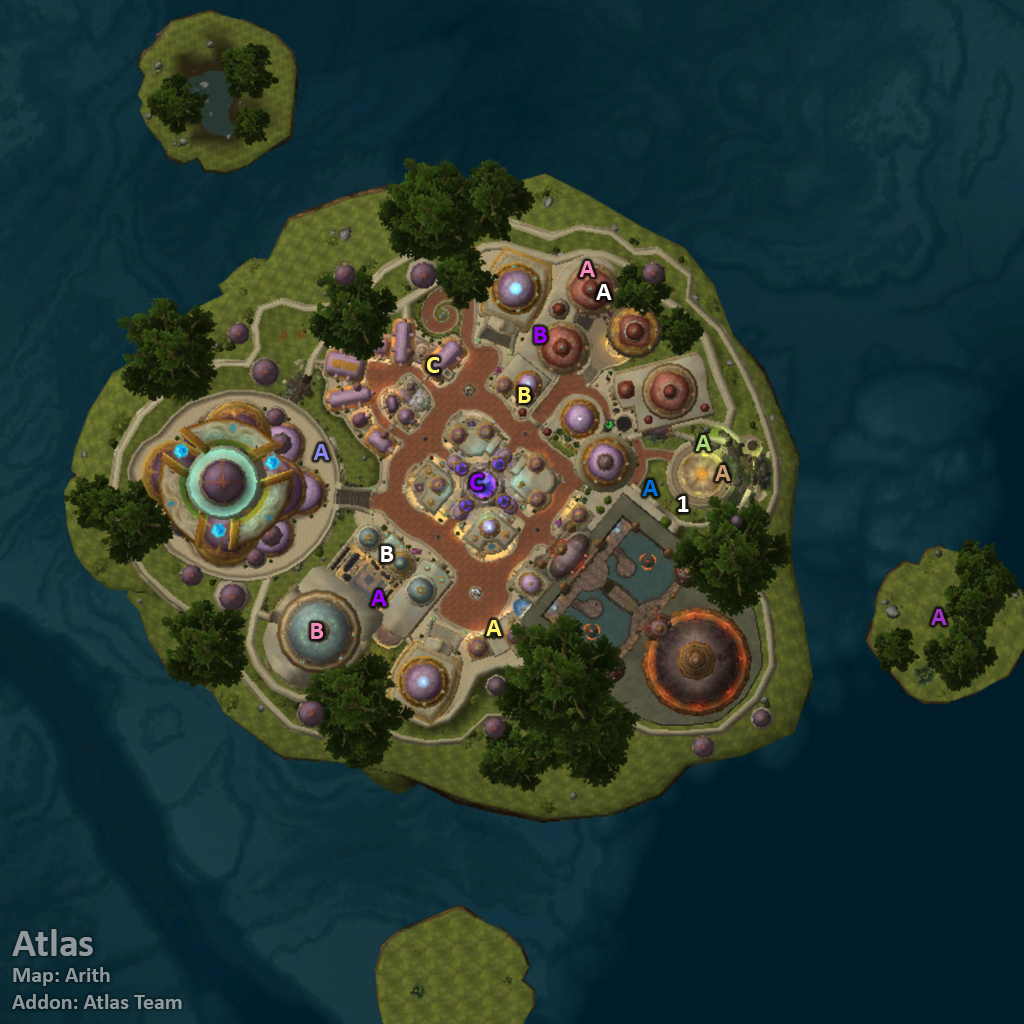
<style>
.page{position:relative;width:1024px;height:1024px}
.page>*{position:absolute;margin:0}
.t1{font:26px "Calibri-Bold";color:#f58cba}
.t2{font:26px "Calibri-Bold";color:#ffffff}
.t3{font:26px "Calibri-Bold";color:#9900ff}
.t4{font:26px "Calibri-Bold";color:#fff569}
.t5{font:26px "Calibri-Bold";color:#abd473}
.t6{font:26px "Calibri-Bold";color:#8788ee}
.t7{font:26px "Calibri-Bold";color:#c79c6e}
.t8{font:26px "Calibri-Bold";color:#0070de}
.t9{font:26px "Calibri-Bold";color:#a330c9}
.t10{font:22px "Calibri-Bold";color:#90989b}
.t11{font:40px "Calibri-Bold";color:#90989b}
</style>
<div class="page">
<p class="t1" style="left:579px;top:261px;width:16px;height:16px">A</p>
<p class="t2" style="left:596px;top:284px;width:16px;height:16px">A</p>
<p class="t3" style="left:534px;top:327px;width:13px;height:16px">B</p>
<p class="t4" style="left:427px;top:357px;width:13px;height:16px">C</p>
<p class="t4" style="left:518px;top:387px;width:13px;height:16px">B</p>
<p class="t5" style="left:695px;top:435px;width:16px;height:16px">A</p>
<p class="t6" style="left:313px;top:444px;width:16px;height:16px">A</p>
<p class="t7" style="left:715px;top:465px;width:16px;height:16px">A</p>
<p class="t3" style="left:470px;top:474px;width:13px;height:16px">C</p>
<p class="t8" style="left:642px;top:480px;width:16px;height:16px">A</p>
<p class="t2" style="left:678px;top:496px;width:11px;height:16px">1</p>
<p class="t2" style="left:381px;top:546px;width:13px;height:16px">B</p>
<p class="t3" style="left:371px;top:590px;width:16px;height:16px">A</p>
<p class="t9" style="left:931px;top:609px;width:16px;height:16px">A</p>
<p class="t1" style="left:311px;top:623px;width:13px;height:16px">B</p>
<p class="t4" style="left:486px;top:620px;width:16px;height:16px">A</p>
<p class="t10" style="left:12px;top:929px;width:170px;height:80px"><span class="t11">Atlas<br></span>Map: Arith<br>Addon: Atlas Team</p>
</div>
